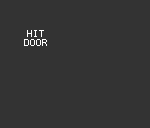
<style>
.page{position:relative;width:150px;height:128px;background:#333333}
.page>*{position:absolute;margin:0}
.t1{font:8px "Terminal";color:#ffffff}
</style>
<div class="page">
<p class="t1" style="left:24px;top:30px;width:23px;height:16px;text-align:center">HIT<br>DOOR</p>
</div>
